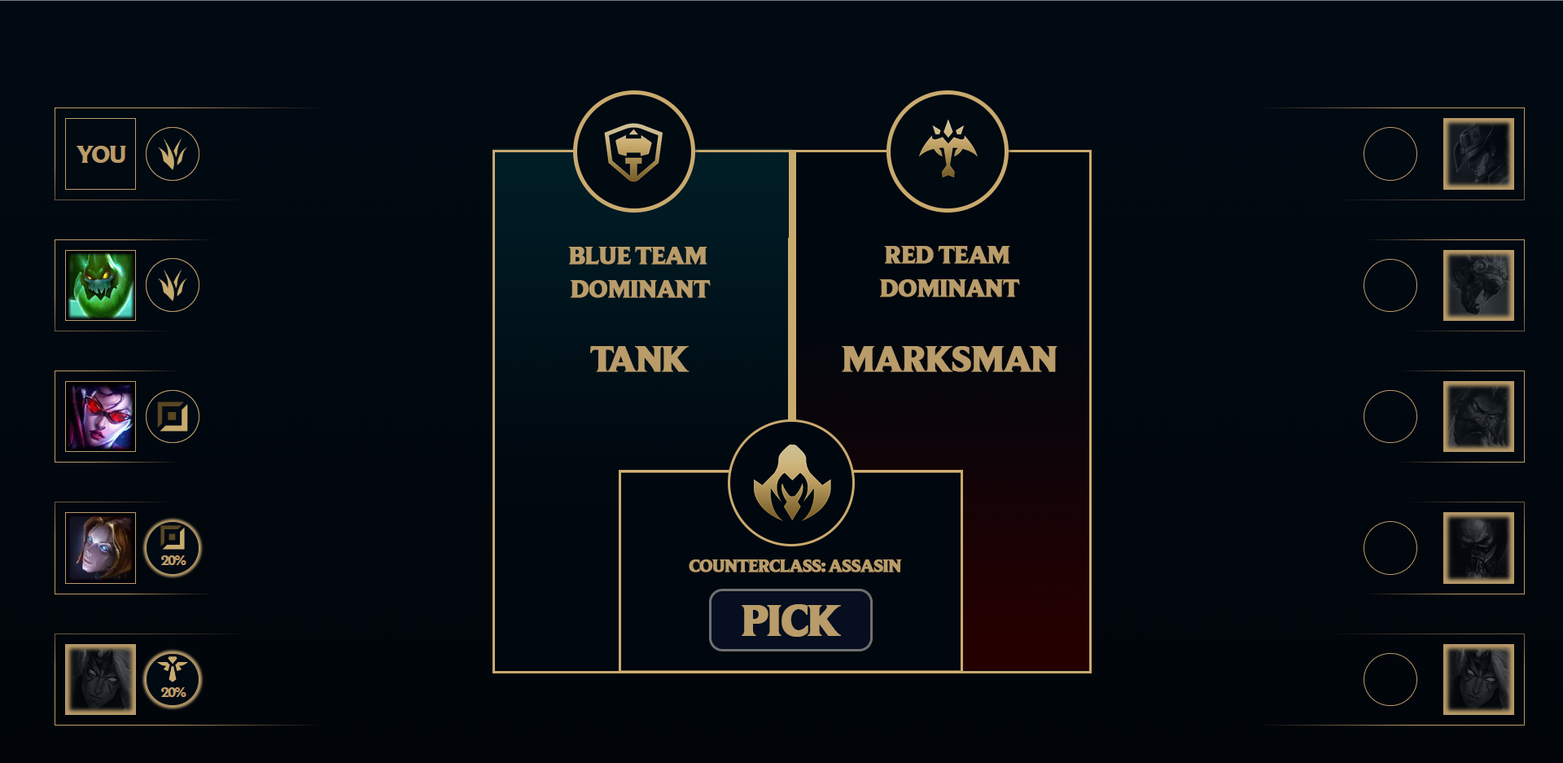
<style>
.page{position:relative;width:1563px;height:763px}
.page>*{position:absolute;margin:0}
.t1{font:25.6px/33.4px "BeaufortforLOL-Heavy";letter-spacing:-0.06em;color:#b99c6a;font-weight:bold}
.t2{font:37px "BeaufortforLOL-Heavy";letter-spacing:-0.06em;color:#b99c6a;font-weight:bold}
.t3{font:17.7px "BeaufortforLOL-Heavy";letter-spacing:-0.06em;color:#b99c6a;font-weight:bold}
.t4{font:44.6px "BeaufortforLOL-Heavy";letter-spacing:-0.06em;color:#b99c6a;font-weight:bold}
</style>
<div class="page">
<p class="t1" style="left:879px;top:246px;width:141px;height:51px;text-align:center">RED TEAM <br>DOMINANT</p>
<p class="t1" style="left:568px;top:247px;width:143px;height:51px;text-align:center">BLUE TEAM <br>DOMINANT</p>
<p class="t2" style="left:590px;top:346px;width:100px;height:26px">TANK</p>
<p class="t2" style="left:842px;top:346px;width:216px;height:26px">MARKSMAN</p>
<p class="t3" style="left:689px;top:559px;width:213px;height:13px">COUNTERCLASS: ASSASIN</p>
<p class="t4" style="left:742px;top:604px;width:99px;height:33px">PICK</p>
</div>
